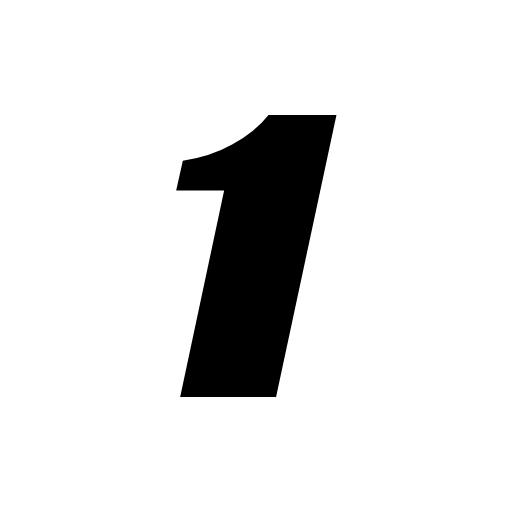
<style>
.page{position:relative;width:512px;height:512px;background:#ffffff}
.page>*{position:absolute;margin:0}
.t1{font:444px "RacingSansOne-Regular";color:#000000}
</style>
<div class="page">
<p class="t1" style="left:176px;top:115px;width:161px;height:282px">1</p>
</div>
